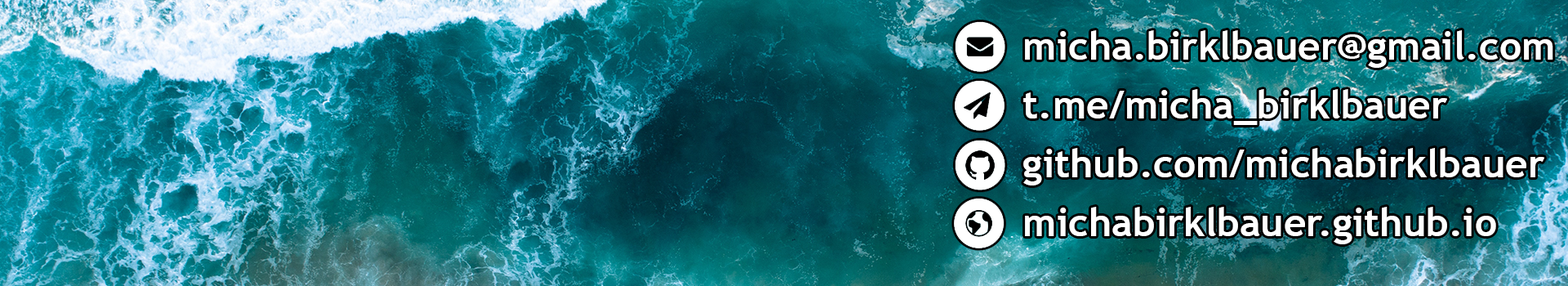
<style>
.page{position:relative;width:1568px;height:286px}
.page>*{position:absolute;margin:0}
.t1{font:39.2px/58.8px "TrebuchetMS-Bold";color:#ffffff}
</style>
<div class="page">
<p class="t1" style="left:1023px;top:30px;width:530px;height:214px">micha.birklbauer@gmail.com<br>t.me/micha_birklbauer<br>github.com/michabirklbauer<br>michabirklbauer.github.io</p>
</div>
